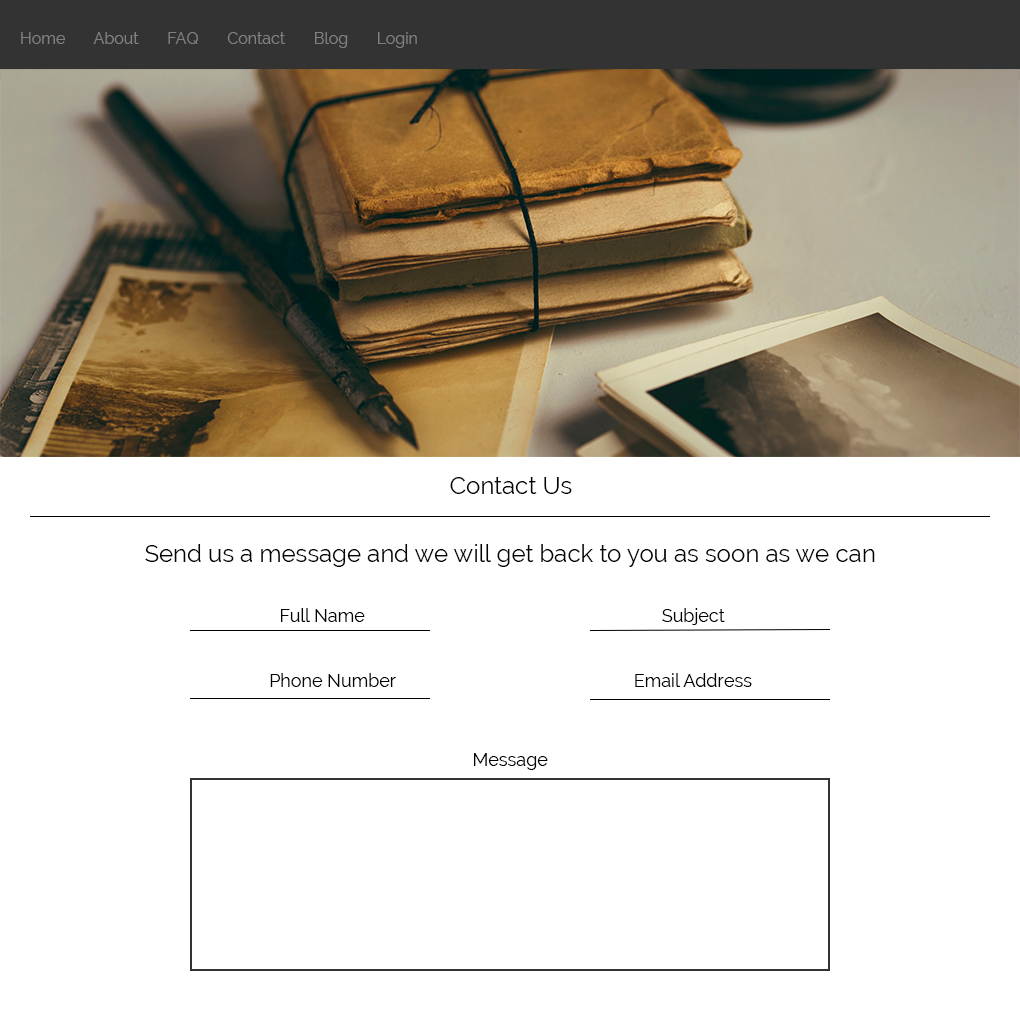
<style>
.page{position:relative;width:1020px;height:1020px;background:#ffffff}
.page>*{position:absolute;margin:0}
.t1{font:16px "Raleway";color:#808080}
.t2{font:24px "Raleway";color:#030303}
.t3{font:18px "Raleway";color:#030303}
</style>
<div class="page">
<p class="t1" style="left:21px;top:32px;width:396px;height:16px">Home       About       FAQ       Contact       Blog       Login</p>
<p class="t2" style="left:450px;top:477px;width:122px;height:17px">Contact Us</p>
<p class="t2" style="left:145px;top:544px;width:730px;height:23px">Send us a message and we will get back to you as soon as we can</p>
<p class="t3" style="left:281px;top:608px;width:84px;height:14px">Full Name</p>
<p class="t3" style="left:662px;top:608px;width:63px;height:17px">Subject</p>
<p class="t3" style="left:270px;top:673px;width:126px;height:14px">Phone Number</p>
<p class="t3" style="left:635px;top:673px;width:117px;height:14px">Email Address</p>
<p class="t3" style="left:474px;top:753px;width:74px;height:17px">Message</p>
</div>
